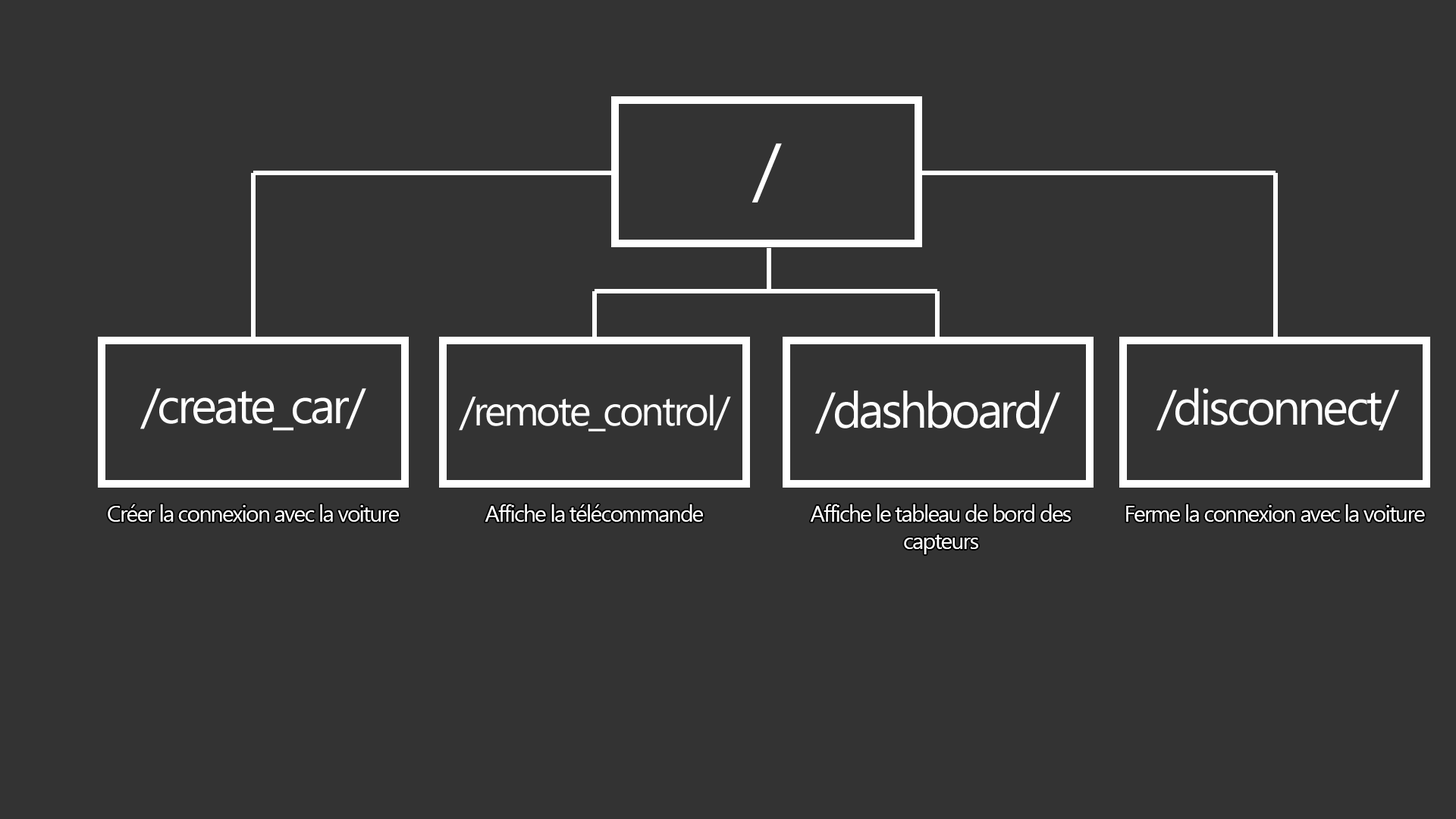
<style>
.page{position:relative;width:1456px;height:819px;background:#333333}
.page>*{position:absolute;margin:0}
.t1{font:72.3px "Gadugi";letter-spacing:-0.06em;color:#ffffff}
.t2{font:49.5px "Gadugi";letter-spacing:-0.06em;color:#ffffff}
.t3{font:41.1px "Gadugi";letter-spacing:-0.06em;color:#ffffff}
.t4{font:50.2px "Gadugi";letter-spacing:-0.06em;color:#ffffff}
.t5{font:22.7px "Gadugi";letter-spacing:-0.06em;color:#ffffff}
</style>
<div class="page">
<p class="t1" style="left:751px;top:143px;width:31px;height:59px">/</p>
<p class="t2" style="left:140px;top:388px;width:226px;height:43px">/create_car/</p>
<p class="t2" style="left:1156px;top:388px;width:243px;height:43px">/disconnect/</p>
<p class="t3" style="left:459px;top:394px;width:272px;height:37px">/remote_control/</p>
<p class="t4" style="left:815px;top:391px;width:245px;height:43px">/dashboard/</p>
<p class="t5" style="left:108px;top:504px;width:291px;height:18px">Créer la connexion avec la voiture</p>
<p class="t5" style="left:485px;top:504px;width:218px;height:18px">Affiche la télécommande</p>
<p class="t5" style="left:810px;top:504px;width:261px;height:50px;text-align:center">Affiche le tableau de bord des capteurs</p>
<p class="t5" style="left:1126px;top:504px;width:299px;height:18px">Ferme la connexion avec la voiture</p>
</div>
